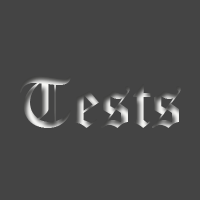
<style>
.page{position:relative;width:200px;height:200px;background:#444444}
.page>*{position:absolute;margin:0}
.t1{font:70px "OldEnglishTextMT"}
</style>
<div class="page">
<p class="t1" style="left:19px;top:76px;width:162px;height:52px">Tests</p>
</div>
